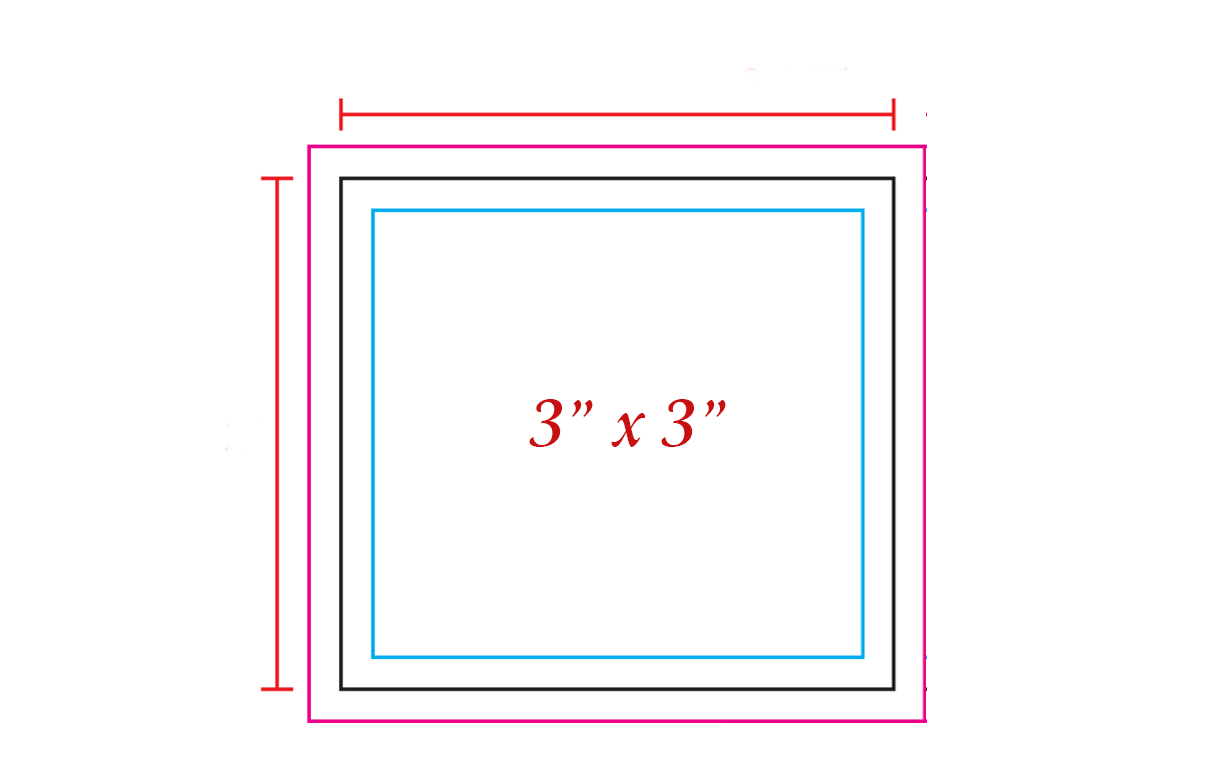
<style>
.page{position:relative;width:1227px;height:776px;background:#ffffff}
.page>*{position:absolute;margin:0}
.t1{font:72.7px "CataneoBT-Regular";color:#c81010}
</style>
<div class="page">
<p class="t1" style="left:529px;top:399px;width:197px;height:48px">3” x 3”</p>
</div>
